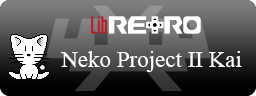
<style>
.page{position:relative;width:256px;height:96px}
.page>*{position:absolute;margin:0}
.t1{font:23px "TimesNewRomanPSMT";color:#ffffff}
</style>
<div class="page">
<p class="t1" style="left:60px;top:51px;width:182px;height:21px">Neko Project II Kai</p>
</div>
